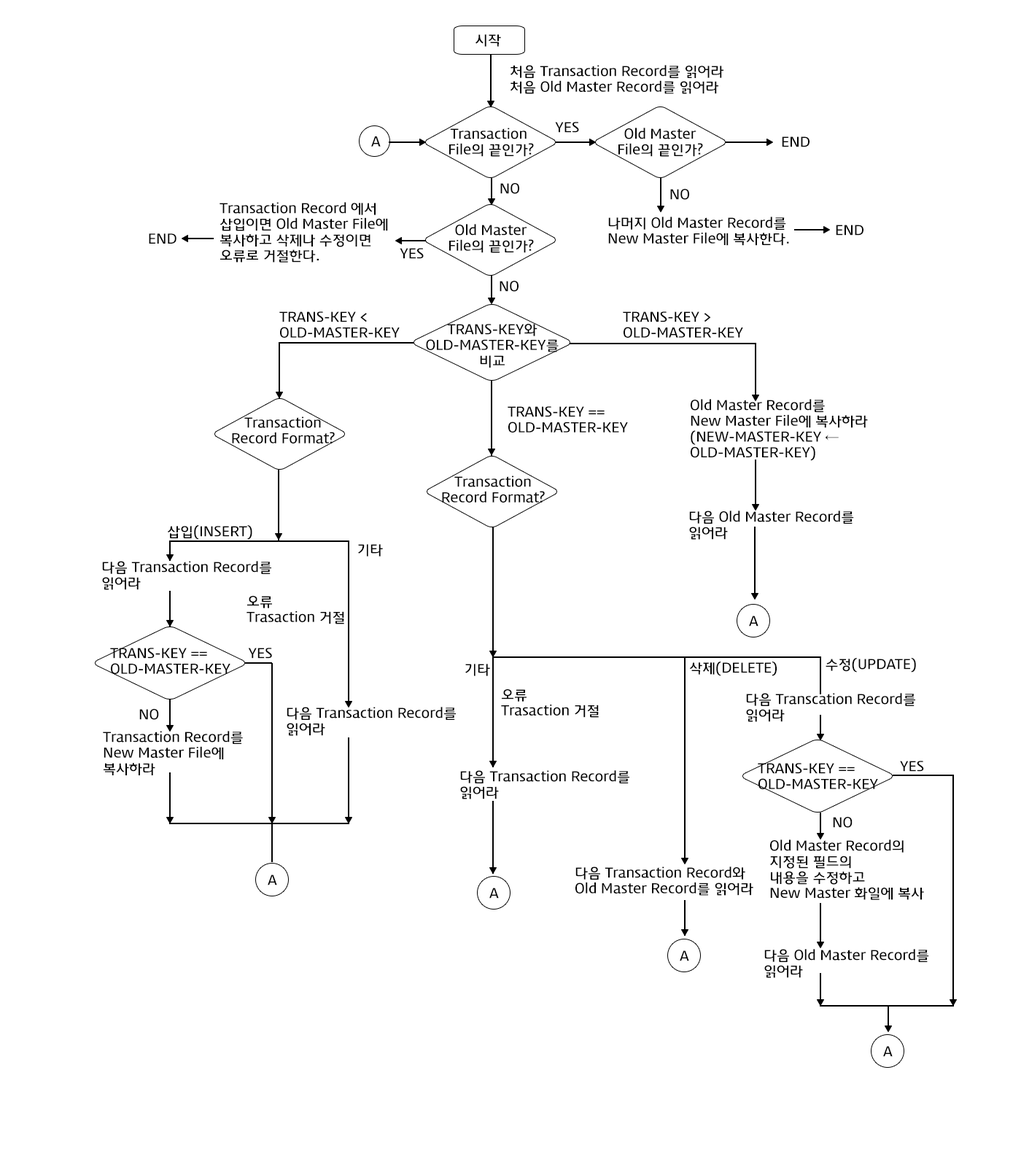
<style>
.page{position:relative;width:1021px;height:1167px;background:#ffffff}
.page>*{position:absolute;margin:0}
.t1{font:13.1px "Daum_Regular";color:#000000}
</style>
<div class="page">
<p class="t1" style="left:476px;top:34px;width:25px;height:13px">시작</p>
<p class="t1" style="left:510px;top:65px;width:214px;height:29px">처음 Transaction Record를 읽어라<br>처음 Old Master Record를 읽어라</p>
<p class="t1" style="left:555px;top:122px;width:24px;height:11px">YES</p>
<p class="t1" style="left:371px;top:136px;width:10px;height:11px">A</p>
<p class="t1" style="left:449px;top:128px;width:85px;height:29px;text-align:center">Transaction <br>File의 끝인가?</p>
<p class="t1" style="left:619px;top:128px;width:84px;height:29px;text-align:center">Old Master<br>File의 끝인가?</p>
<p class="t1" style="left:782px;top:136px;width:28px;height:11px">END</p>
<p class="t1" style="left:501px;top:183px;width:18px;height:11px">NO</p>
<p class="t1" style="left:671px;top:189px;width:18px;height:11px">NO</p>
<p class="t1" style="left:220px;top:202px;width:168px;height:61px">Transaction Record 에서 <br>삽입이면 Old Master File에<br>복사하고 삭제나 수정이면<br>오류로 거절한다.</p>
<p class="t1" style="left:608px;top:217px;width:181px;height:29px">나머지 Old Master Record를 <br>New Master File에 복사한다.</p>
<p class="t1" style="left:149px;top:233px;width:28px;height:11px">END</p>
<p class="t1" style="left:449px;top:224px;width:85px;height:29px;text-align:center">Old Master<br>File의 끝인가?</p>
<p class="t1" style="left:836px;top:225px;width:28px;height:11px">END</p>
<p class="t1" style="left:400px;top:248px;width:24px;height:11px">YES</p>
<p class="t1" style="left:500px;top:281px;width:19px;height:11px">NO</p>
<p class="t1" style="left:279px;top:312px;width:121px;height:26px">TRANS-KEY &lt;<br>OLD-MASTER-KEY</p>
<p class="t1" style="left:623px;top:312px;width:120px;height:26px">TRANS-KEY &gt; <br>OLD-MASTER-KEY</p>
<p class="t1" style="left:426px;top:324px;width:133px;height:44px;text-align:center">TRANS-KEY와<br>OLD-MASTER-KEY를<br>비교</p>
<p class="t1" style="left:691px;top:399px;width:177px;height:62px">Old Master Record를<br>New Master File에 복사하라<br>(NEW-MASTER-KEY ← <br>OLD-MASTER-KEY)</p>
<p class="t1" style="left:508px;top:406px;width:120px;height:27px">TRANS-KEY ==<br>OLD-MASTER-KEY</p>
<p class="t1" style="left:232px;top:417px;width:103px;height:27px;text-align:center">Transaction<br>Record Format?</p>
<p class="t1" style="left:442px;top:476px;width:103px;height:27px;text-align:center">Transaction<br>Record Format?</p>
<p class="t1" style="left:689px;top:511px;width:165px;height:29px">다음 Old Master Record를<br>읽어라</p>
<p class="t1" style="left:167px;top:525px;width:85px;height:15px">삽입(INSERT)</p>
<p class="t1" style="left:358px;top:544px;width:25px;height:13px">기타</p>
<p class="t1" style="left:102px;top:561px;width:169px;height:29px">다음 Transaction Record를<br>읽어라</p>
<p class="t1" style="left:247px;top:596px;width:97px;height:29px">오류<br>Trasaction 거절</p>
<p class="t1" style="left:749px;top:616px;width:10px;height:11px">A</p>
<p class="t1" style="left:110px;top:648px;width:121px;height:26px">TRANS-KEY ==<br>OLD-MASTER-KEY</p>
<p class="t1" style="left:248px;top:648px;width:24px;height:11px">YES</p>
<p class="t1" style="left:465px;top:664px;width:25px;height:12px">기타</p>
<p class="t1" style="left:689px;top:662px;width:88px;height:14px">삭제(DELETE)</p>
<p class="t1" style="left:826px;top:658px;width:90px;height:15px">수정(UPDATE)</p>
<p class="t1" style="left:501px;top:689px;width:98px;height:29px">오류<br>Trasaction 거절</p>
<p class="t1" style="left:746px;top:693px;width:170px;height:29px">다음 Transcation Record를<br>읽어라</p>
<p class="t1" style="left:139px;top:709px;width:20px;height:11px">NO</p>
<p class="t1" style="left:287px;top:707px;width:169px;height:29px">다음 Transaction Record를<br>읽어라</p>
<p class="t1" style="left:103px;top:731px;width:140px;height:45px">Transaction Record를<br>New Master File에<br>복사하라</p>
<p class="t1" style="left:900px;top:761px;width:24px;height:11px">YES</p>
<p class="t1" style="left:460px;top:770px;width:170px;height:30px">다음 Transaction Record를 <br>읽어라</p>
<p class="t1" style="left:758px;top:763px;width:120px;height:26px">TRANS-KEY ==<br>OLD-MASTER-KEY</p>
<p class="t1" style="left:833px;top:817px;width:20px;height:11px">NO</p>
<p class="t1" style="left:770px;top:840px;width:154px;height:60px">Old Master Record의 <br>지정된 필드의 <br>내용을 수정하고 <br>New Master 화일에 복사</p>
<p class="t1" style="left:576px;top:867px;width:178px;height:29px">다음 Transaction Record와<br>Old Master Record를 읽어라</p>
<p class="t1" style="left:268px;top:875px;width:9px;height:11px">A</p>
<p class="t1" style="left:490px;top:888px;width:9px;height:11px">A</p>
<p class="t1" style="left:680px;top:951px;width:9px;height:11px">A</p>
<p class="t1" style="left:765px;top:949px;width:165px;height:29px">다음 Old Master Record를 <br>읽어라</p>
<p class="t1" style="left:884px;top:1046px;width:9px;height:11px">A</p>
</div>
